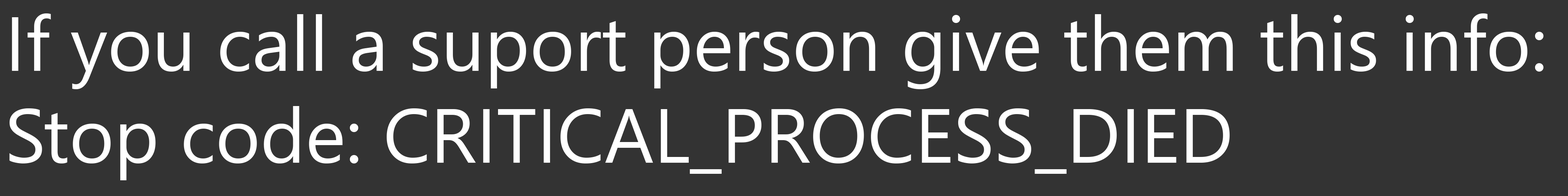
<style>
.page{position:relative;width:1568px;height:196px;background:#333333}
.page>*{position:absolute;margin:0}
.t1{font:76.6px "SegoeUI";color:#ffffff}
</style>
<div class="page">
<p class="t1" style="left:9px;top:13px;width:1535px;height:167px">If you call a suport person give them this info:<br>Stop code: CRITICAL_PROCESS_DIED</p>
</div>
